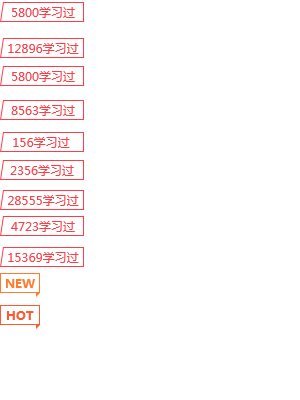
<style>
.page{position:relative;width:300px;height:400px;background:#ffffff}
.page>*{position:absolute;margin:0}
.t1{font:12px "MicrosoftYaHei";color:#fb3f48}
.t2{font:12px "MicrosoftYaHei-Bold";color:#ff7c2d}
.t3{font:12px "MicrosoftYaHei-Bold";color:#ff592d}
</style>
<div class="page">
<p class="t1" style="left:12px;top:7px;width:63px;height:11px">5800学习过</p>
<p class="t1" style="left:8px;top:43px;width:71px;height:11px">12896学习过</p>
<p class="t1" style="left:12px;top:71px;width:63px;height:11px">5800学习过</p>
<p class="t1" style="left:11px;top:105px;width:64px;height:11px">8563学习过</p>
<p class="t1" style="left:13px;top:137px;width:57px;height:11px">156学习过</p>
<p class="t1" style="left:10px;top:165px;width:64px;height:11px">2356学习过</p>
<p class="t1" style="left:8px;top:195px;width:71px;height:11px">28555学习过</p>
<p class="t1" style="left:11px;top:221px;width:64px;height:11px">4723学习过</p>
<p class="t1" style="left:8px;top:252px;width:71px;height:11px">15369学习过</p>
<p class="t2" style="left:6px;top:279px;width:29px;height:9px">NEW</p>
<p class="t3" style="left:7px;top:311px;width:27px;height:9px">HOT</p>
</div>
